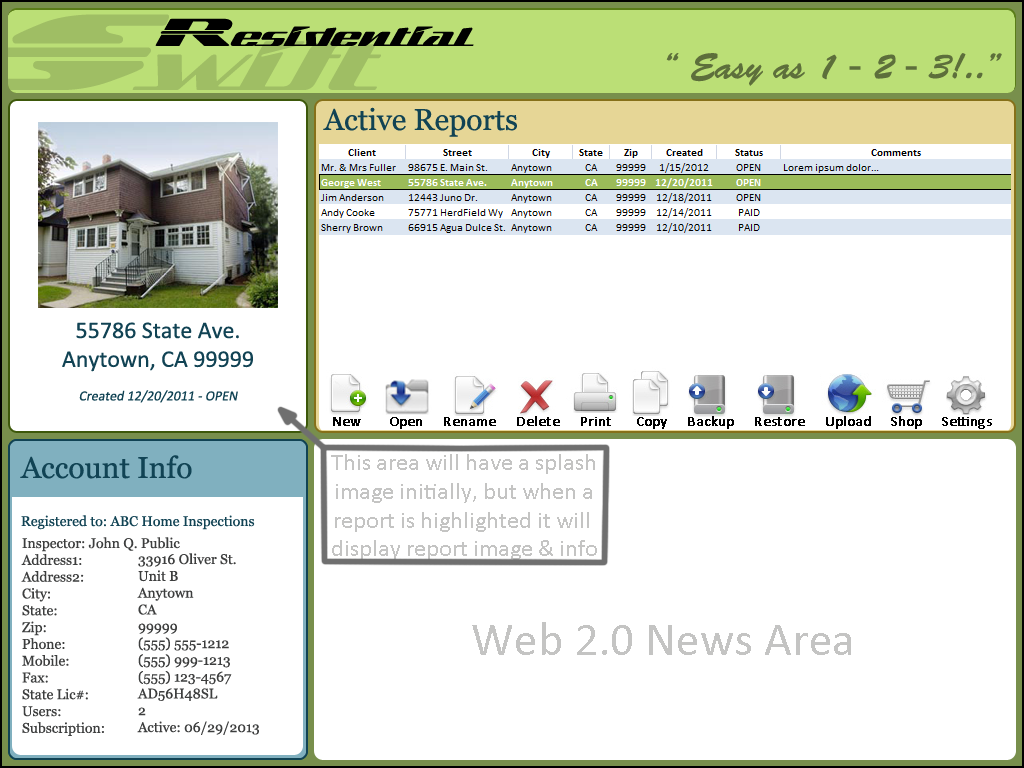
<style>
.page{position:relative;width:1024px;height:768px;background:#ffffff}
.page>*{position:absolute;margin:0}
.t1{font:30px "Georgia";color:#114354}
.t2{font:24px "Calibri";color:#114354}
.t3{font:14px "Calibri";color:#114354;font-style:italic}
.t4{font:14px "Calibri";color:#000000;font-weight:bold}
.t5{font:24px "Calibri";color:#c4c4c3}
.t6{font:14px "Georgia";color:#114354}
.t7{font:14px "Georgia";color:#3d3e3e}
</style>
<div class="page">
<p class="t1" style="left:323px;top:107px;width:194px;height:30px">Active Reports</p>
<p class="t2" style="left:62px;top:322px;width:191px;height:81px;text-align:center">55786 State Ave.<br>Anytown, CA 99999<br><br><span class="t3">Created 12/20/2011 - OPEN</span></p>
<p class="t4" style="left:333px;top:416px;width:659px;height:13px">New       Open     Rename     Delete     Print      Copy     Backup     Restore     Upload     Shop     Settings</p>
<p class="t1" style="left:20px;top:455px;width:172px;height:24px">Account Info</p>
<p class="t5" style="left:331px;top:454px;width:266px;height:106px;text-align:center">This area will have a splash<br>image initially, but when a<br>report is highlighted it will <br>display report image &amp; info</p>
<p class="t6" style="left:21px;top:515px;width:234px;height:15px">Registered to: ABC Home Inspections</p>
<p class="t7" style="left:21px;top:537px;width:159px;height:199px">Inspector: John Q. Public<br>Address1:  <br>Address2:<br>City:<br>State:<br>Zip:<br>Phone:<br>Mobile:<br>Fax:<br>State Lic#:<br>Users:<br>Subscription:</p>
<p class="t7" style="left:137px;top:553px;width:122px;height:182px">33916 Oliver St.<br>Unit B<br>Anytown<br>CA<br>99999<br>(555) 555-1212<br>(555) 999-1213<br>(555) 123-4567<br>AD56H48SL<br>2<br>Active: 06/29/2013</p>
</div>
